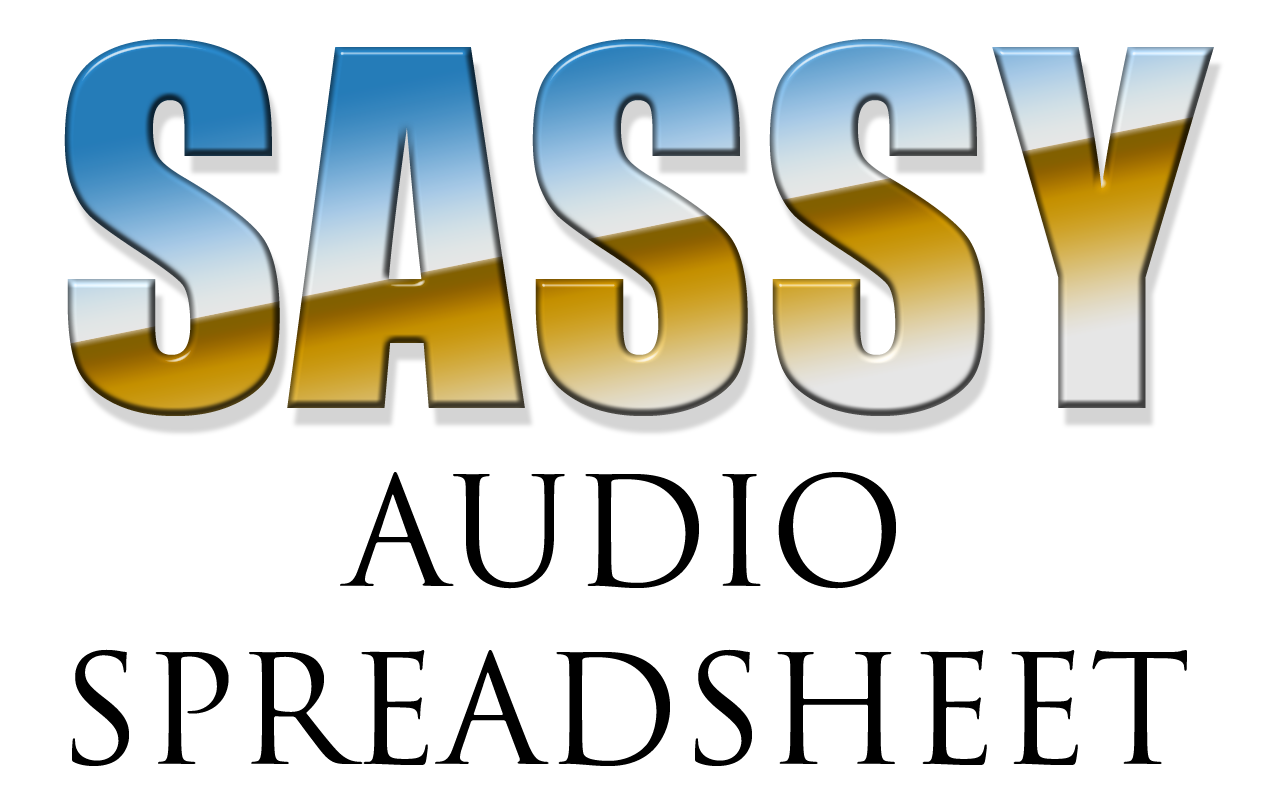
<style>
.page{position:relative;width:1275px;height:807px;background:#ffffff}
.page>*{position:absolute;margin:0}
.t1{font:457.2px "Impact"}
.t2{font:148.9px "TrajanPro-Regular";color:#000000}
</style>
<div class="page">
<p class="t1" style="left:64px;top:39px;width:1150px;height:377px">SASSY</p>
<p class="t2" style="left:72px;top:472px;width:1115px;height:294px;text-align:center">AUDIO<br>SPREADSHEET</p>
</div>
